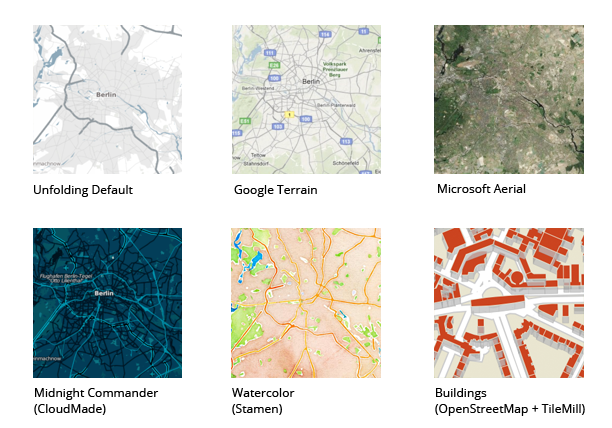
<style>
.page{position:relative;width:612px;height:428px;background:#ffffff}
.page>*{position:absolute;margin:0}
.t1{font:12px "OpenSans";letter-spacing:0.005em;color:#000000}
.t2{font:12px/19px "OpenSans";letter-spacing:0.005em;color:#000000}
</style>
<div class="page">
<p class="t1" style="left:34px;top:185px;width:99px;height:12px">Unfolding Default</p>
<p class="t1" style="left:234px;top:185px;width:83px;height:12px">Google Terrain</p>
<p class="t1" style="left:438px;top:184px;width:88px;height:9px">Microsoft Aerial</p>
<p class="t2" style="left:34px;top:388px;width:125px;height:27px">Midnight Commander<br>(CloudMade)</p>
<p class="t2" style="left:232px;top:388px;width:63px;height:27px">Watercolor<br>(Stamen)</p>
<p class="t2" style="left:435px;top:388px;width:150px;height:28px">Buildings<br>(OpenStreetMap + TileMill)</p>
</div>
